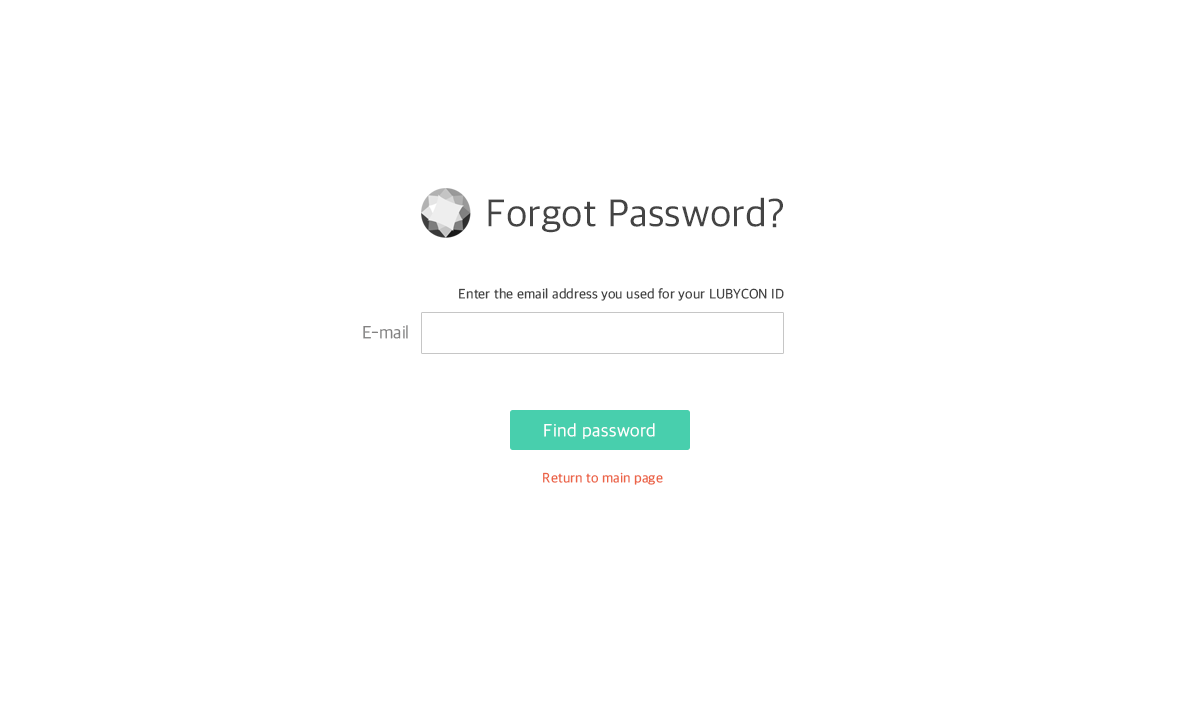
<style>
.page{position:relative;width:1200px;height:712px;background:#ffffff}
.page>*{position:absolute;margin:0}
.t1{font:40px "AppleSDGothicNeo-Regular";color:#444444}
.t2{font:14px "AppleSDGothicNeo-Regular";color:#444444}
.t3{font:18px "AppleSDGothicNeo-Light";color:#838282}
.t4{font:18px "AppleSDGothicNeo-Light";letter-spacing:0.025em;color:#ffffff}
.t5{font:14px "AppleSDGothicNeo-Regular";color:#ec6446}
</style>
<div class="page">
<p class="t1" style="left:488px;top:197px;width:295px;height:36px">Forgot Password?</p>
<p class="t2" style="left:459px;top:288px;width:325px;height:13px">Enter the email address you used for your LUBYCON ID</p>
<p class="t3" style="left:363px;top:325px;width:45px;height:14px">E-mail</p>
<p class="t4" style="left:544px;top:423px;width:111px;height:16px">Find password</p>
<p class="t5" style="left:543px;top:472px;width:120px;height:13px">Return to main page</p>
</div>
